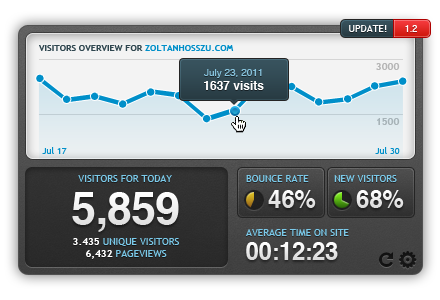
<style>
.page{position:relative;width:440px;height:300px}
.page>*{position:absolute;margin:0}
.t1{font:10px "TrebuchetMS";color:#ffffff;text-transform:uppercase}
.t2{font:9px "Helvetica";color:#ffffff;text-transform:uppercase}
.t3{font:9px "TrebuchetMS-Bold";color:#2f464f;text-transform:uppercase}
.t4{font:9px "TrebuchetMS-Bold";color:#008fc9;text-transform:uppercase}
.t5{font:10px/55px "TrebuchetMS-Bold";color:#b5b5b5;text-transform:uppercase}
.t6{font:10px/14px "Helvetica";color:#87c3dd}
.t7{font:12px/14px "Helvetica-Bold";color:#ffffff}
.t8{font:9px "TrebuchetMS";color:#008fc9}
.t9{font:10px "TrebuchetMS";color:#7bcaea;text-transform:uppercase}
.t10{font:10px/54px "TrebuchetMS";color:#7bcaea;text-transform:uppercase}
.t11{font:45px "Helvetica-Bold";letter-spacing:-0.02em;color:#ffffff}
.t12{font:24px "Helvetica-Bold";color:#ffffff;text-transform:uppercase}
.t13{font:10px/12px "TrebuchetMS";color:#7bcaea;text-transform:uppercase}
.t14{font:10px/12px "TrebuchetMS-Bold";color:#ffffff;text-transform:uppercase}
.t15{font:24px "Helvetica-Bold";letter-spacing:-0.02em;color:#ffffff;text-transform:uppercase}
</style>
<div class="page">
<p class="t1" style="left:349px;top:25px;width:38px;height:7px">update!</p>
<p class="t2" style="left:405px;top:25px;width:12px;height:7px">1.2</p>
<p class="t3" style="left:39px;top:45px;width:195px;height:6px">Visitors overview for <span class="t4">zoltanhosszu.com</span></p>
<p class="t5" style="left:376px;top:63px;width:24px;height:62px;text-align:right">3000<br>1500</p>
<p class="t6" style="left:204px;top:69px;width:60px;height:21px;text-align:center">July 23, 2011<br><span class="t7">1637 visits</span></p>
<p class="t8" style="left:42px;top:147px;width:25px;height:7px">Jul 17</p>
<p class="t8" style="left:375px;top:147px;width:25px;height:7px">Jul 30</p>
<p class="t9" style="left:78px;top:175px;width:94px;height:7px">Visitors for Today</p>
<p class="t10" style="left:246px;top:175px;width:151px;height:61px">Bounce rate        New visitors<br>Average time on site</p>
<p class="t11" style="left:72px;top:192px;width:107px;height:40px">5,859</p>
<p class="t12" style="left:268px;top:190px;width:48px;height:18px">46%</p>
<p class="t12" style="left:356px;top:190px;width:48px;height:18px">68%</p>
<p class="t13" style="left:73px;top:238px;width:106px;height:21px;text-align:center"><span class="t14">3.435</span> unique visitors<br><span class="t14">6,432</span> Pageviews</p>
<p class="t15" style="left:246px;top:242px;width:92px;height:18px">00:12:23</p>
</div>
